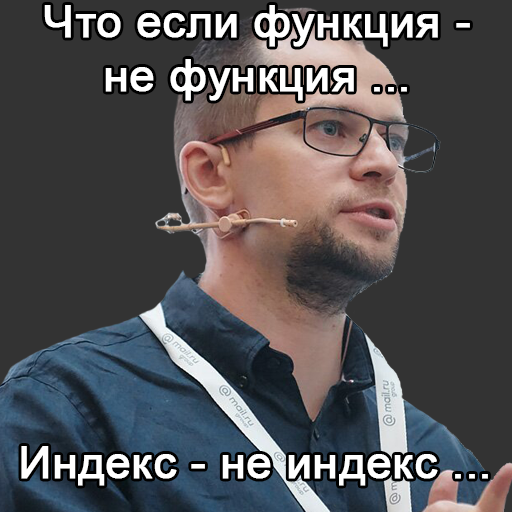
<style>
.page{position:relative;width:512px;height:512px;background:#333333}
.page>*{position:absolute;margin:0}
.t1{font:45px "ArialMT";color:#ffffff;font-weight:bold}
</style>
<div class="page">
<p class="t1" style="left:44px;top:5px;width:426px;height:96px;text-align:center">Что если функция -<br>не функция ...</p>
<p class="t1" style="left:21px;top:446px;width:467px;height:40px">Индекс - не индекс ...</p>
</div>
